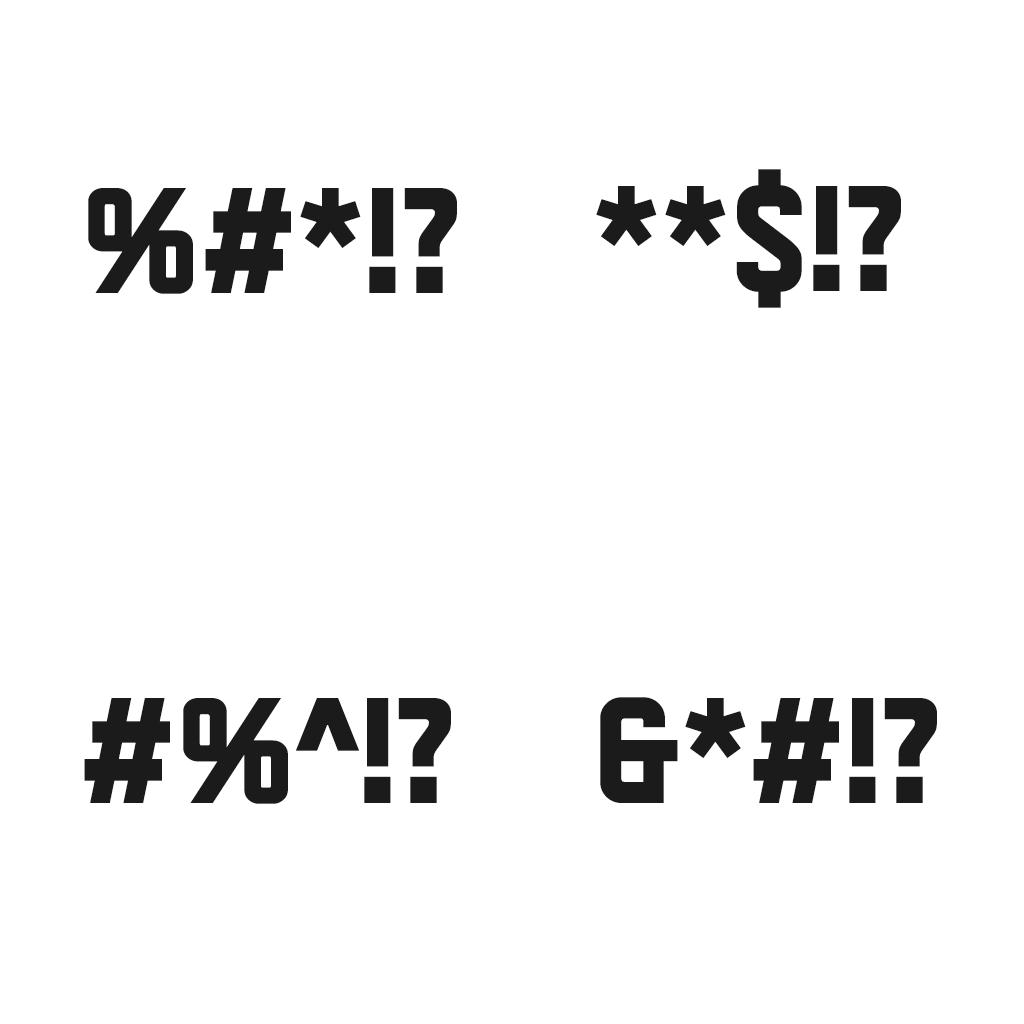
<style>
.page{position:relative;width:1024px;height:1024px;background:#ffffff}
.page>*{position:absolute;margin:0}
.t1{font:149.9px "KTFJermilov-Solid";color:#1b1b1b}
</style>
<div class="page">
<p class="t1" style="left:596px;top:169px;width:305px;height:139px">**$!?</p>
<p class="t1" style="left:88px;top:188px;width:369px;height:106px">%#*!?</p>
<p class="t1" style="left:84px;top:698px;width:367px;height:106px">#%^!?</p>
<p class="t1" style="left:600px;top:697px;width:337px;height:106px">&amp;*#!?</p>
</div>
